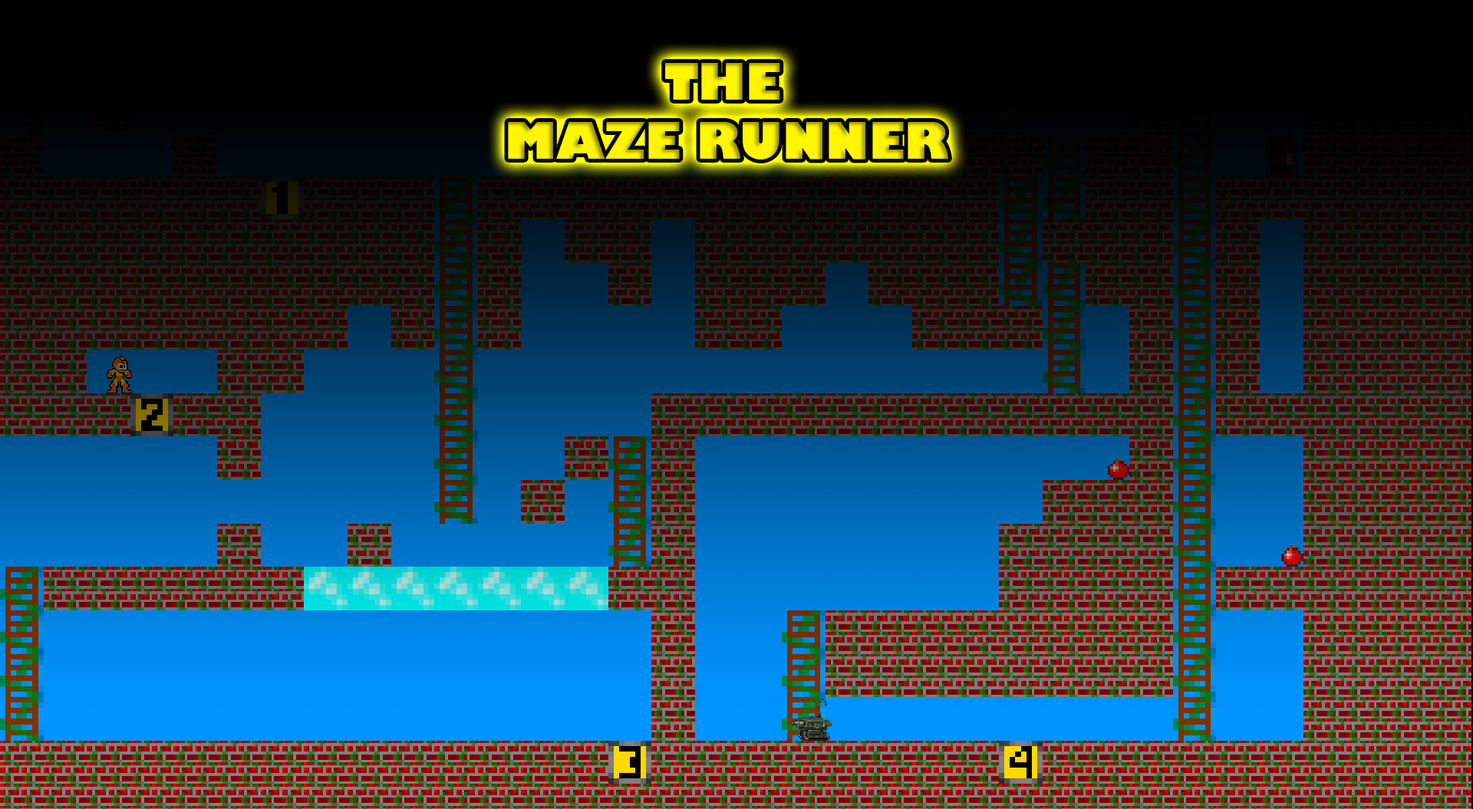
<style>
.page{position:relative;width:1473px;height:809px}
.page>*{position:absolute;margin:0}
.t1{font:49.1px "GillSans-UltraBold";color:#fff600}
.t2{font:61.4px "EngraversMT";color:#000000}
</style>
<div class="page">
<p class="t1" style="left:508px;top:63px;width:440px;height:97px;text-align:center"><span class="t2">                      </span>THE<br>MAZE RUNNER</p>
</div>
